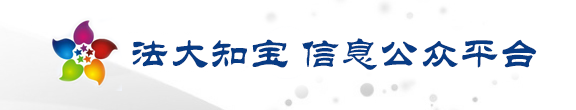
<style>
.page{position:relative;width:576px;height:110px;background:#ffffff}
.page>*{position:absolute;margin:0}
.t1{font:40px "STLiti";color:#073b84}
</style>
<div class="page">
<p class="t1" style="left:132px;top:38px;width:405px;height:32px">法大知宝 信息公众平台</p>
</div>
